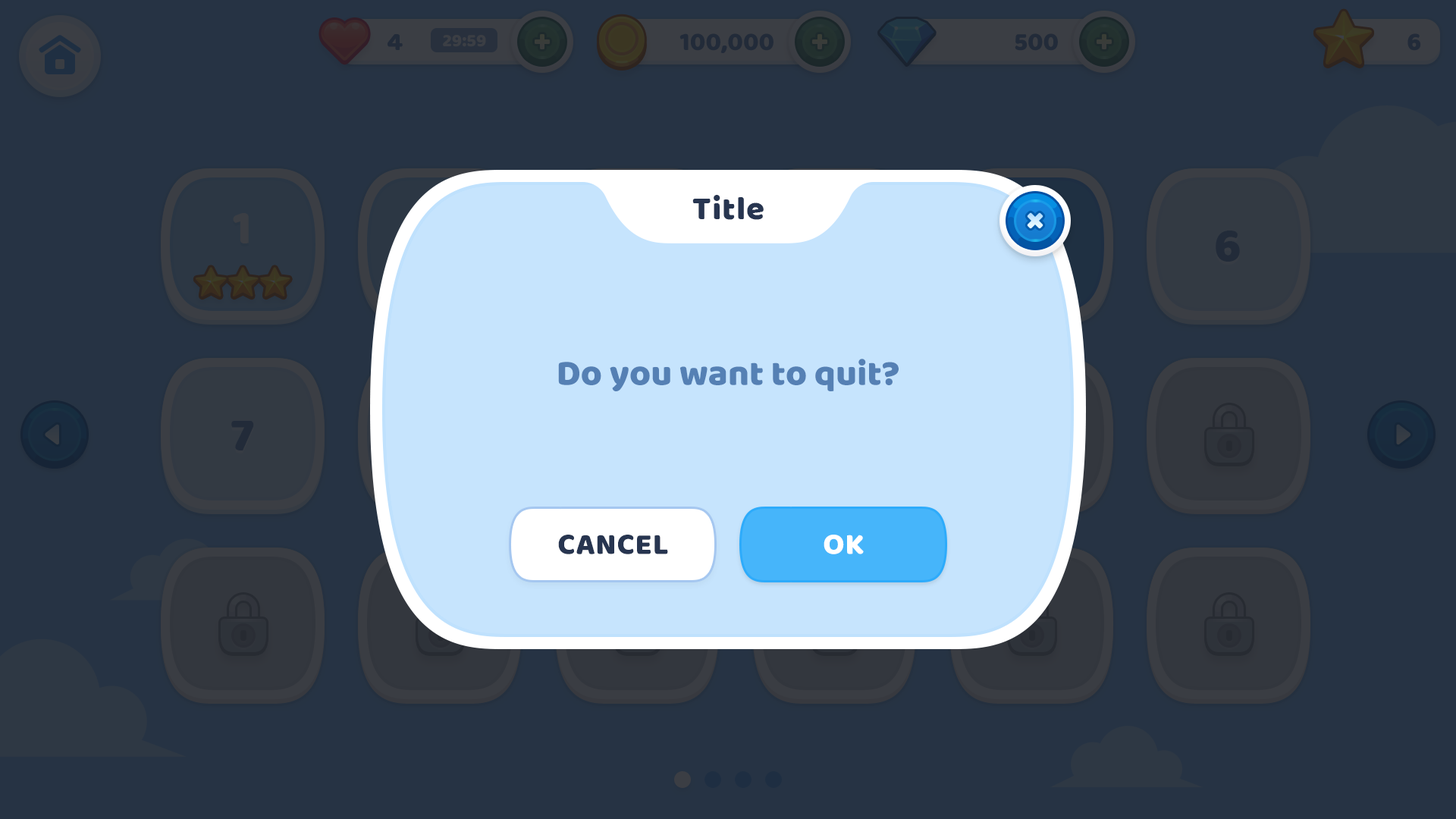
<style>
.page{position:relative;width:1456px;height:819px;background:#263344}
.page>*{position:absolute;margin:0}
.t1{font:33.4px "BalooBhaijaan-Regular";color:#273550}
.t2{font:36.4px "BalooBhaijaan-Regular";color:#5580b4}
.t3{font:30.3px "BalooBhaijaan-Regular";color:#273550;text-transform:uppercase}
.t4{font:30.3px "BalooBhaijaan-Regular";color:#ffffff;text-transform:uppercase}
</style>
<div class="page">
<p class="t1" style="left:692px;top:195px;width:72px;height:25px">Title</p>
<p class="t2" style="left:558px;top:359px;width:341px;height:32px">Do you want to quit?</p>
<p class="t3" style="left:558px;top:535px;width:110px;height:19px">Cancel</p>
<p class="t4" style="left:824px;top:535px;width:40px;height:19px">Ok</p>
</div>
